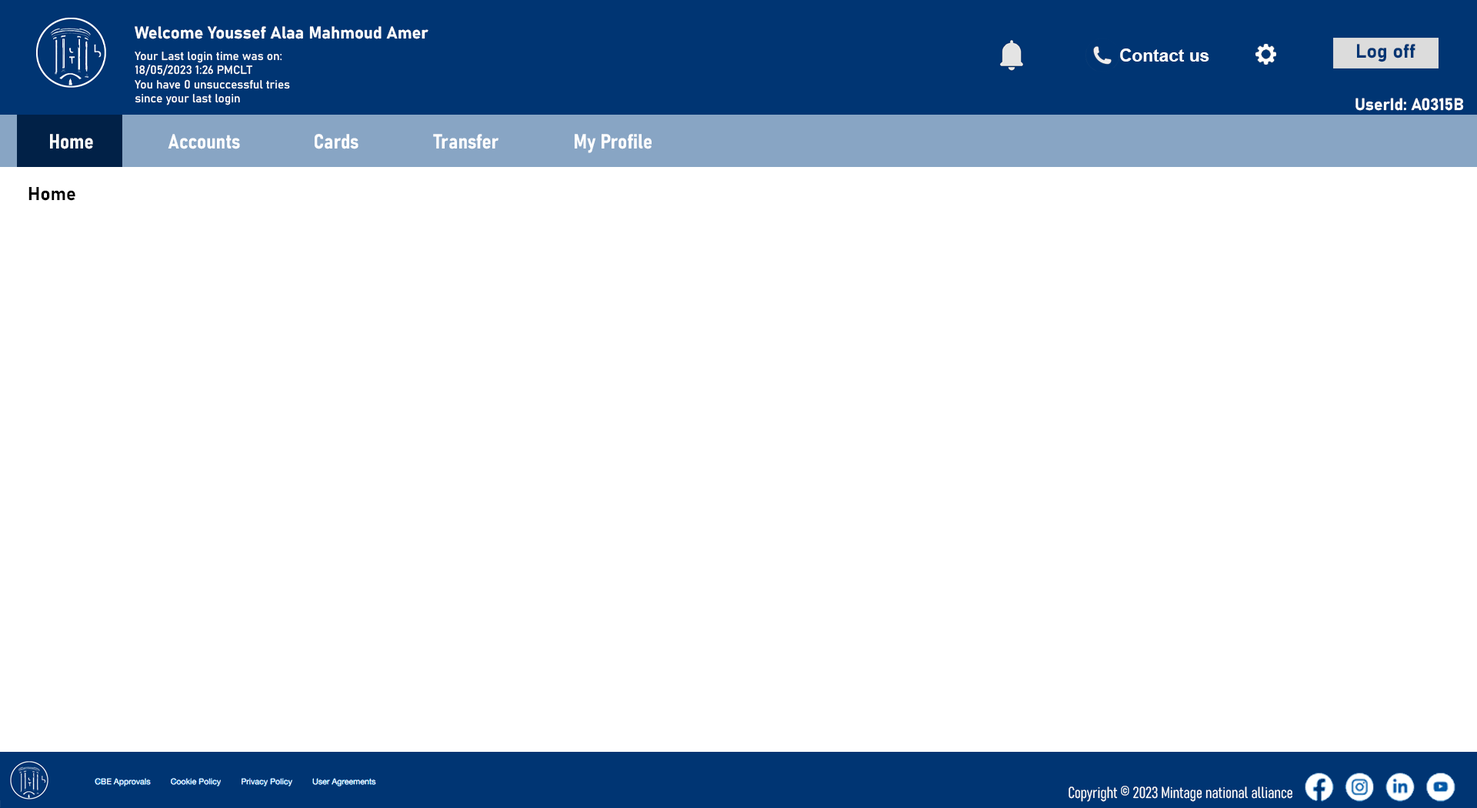
<style>
.page{position:relative;width:1477px;height:808px;background:#ffffff}
.page>*{position:absolute;margin:0}
.t1{font:16.9px "Bahnschrift-Bold";color:#ffffff}
.t2{font:11.7px "Bahnschrift";color:#ffffff}
.t3{font:17.4px "Arial-BoldMT";color:#ffffff}
.t4{font:19.2px "Bahnschrift-Bold";color:#003573}
.t5{font:16.4px "Bahnschrift-Bold";color:#ffffff}
.t6{font:20.3px "Bahnschrift-BoldSemiCondensed";color:#ffffff}
.t7{font:18.5px "Bahnschrift-Bold";color:#000000}
.t8{font:15.6px "Bahnschrift-LightCondensed";color:#ffffff}
</style>
<div class="page">
<p class="t1" style="left:135px;top:26px;width:293px;height:13px">Welcome Youssef Alaa Mahmoud Amer</p>
<p class="t2" style="left:135px;top:52px;width:155px;height:53px">Your Last login time was on:<br>18/05/2023 1:26 PMCLT<br>You have 0 unsuccessful tries <br>since your last login</p>
<p class="t3" style="left:1120px;top:48px;width:89px;height:14px">Contact us</p>
<p class="t4" style="left:1357px;top:44px;width:58px;height:18px">Log off</p>
<p class="t5" style="left:1355px;top:98px;width:109px;height:13px">UserId: A0315B</p>
<p class="t6" style="left:50px;top:134px;width:43px;height:15px">Home</p>
<p class="t6" style="left:168px;top:134px;width:72px;height:15px">Accounts</p>
<p class="t6" style="left:315px;top:134px;width:43px;height:15px">Cards</p>
<p class="t6" style="left:433px;top:134px;width:65px;height:15px">Transfer</p>
<p class="t6" style="left:575px;top:134px;width:76px;height:19px">My Profile</p>
<p class="t7" style="left:28px;top:187px;width:47px;height:14px">Home</p>
<p class="t8" style="left:1068px;top:785px;width:224px;height:16px">Copyright © 2023 Mintage national alliance</p>
</div>
